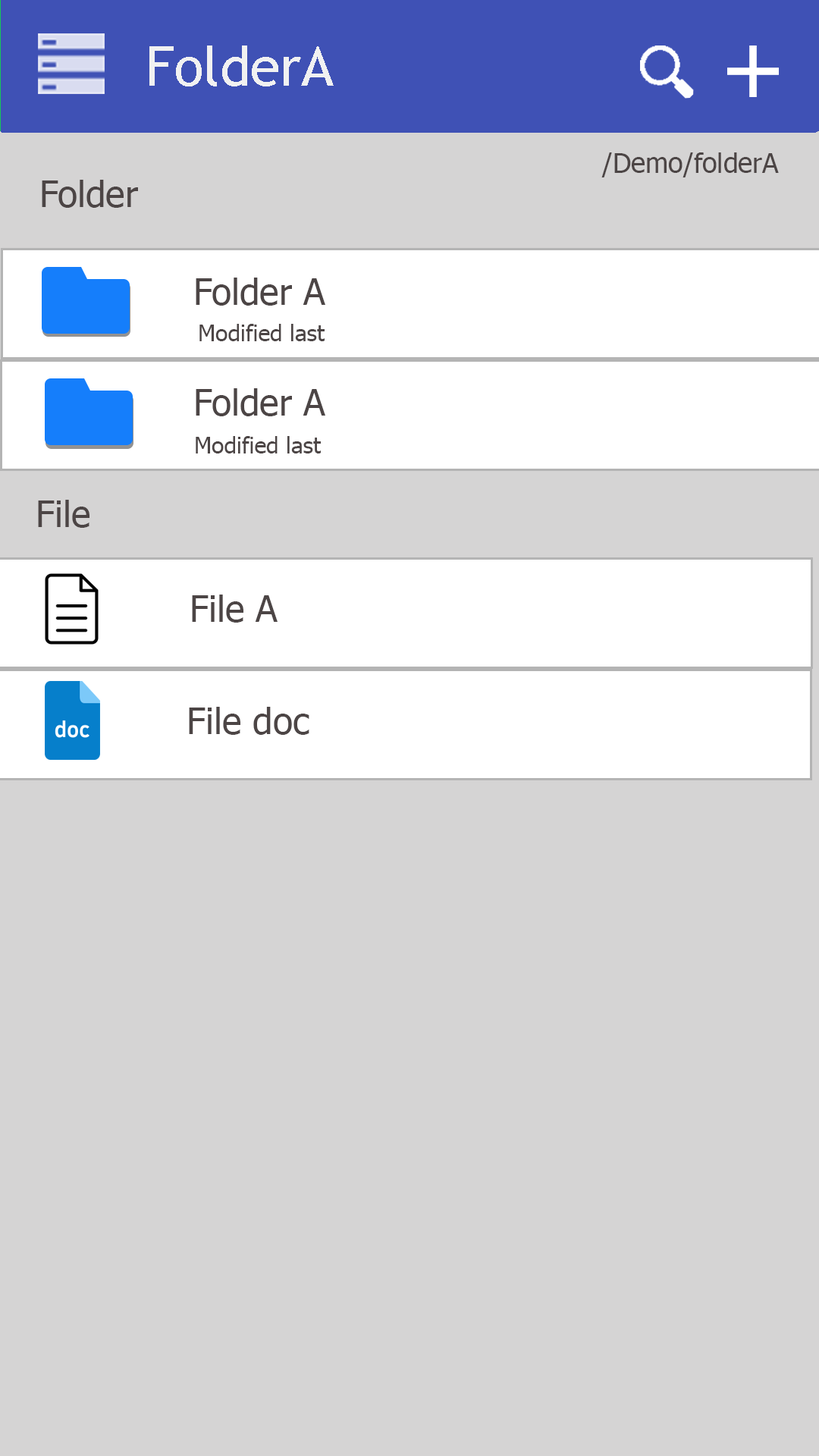
<style>
.page{position:relative;width:819px;height:1456px;background:#d5d4d4}
.page>*{position:absolute;margin:0}
.t1{font:54.6px "TrebuchetMS";color:#f1f1f1}
.t2{font:27.3px "Tahoma";color:#4c4545}
.t3{font:36.4px "Tahoma";color:#4c4545}
.t4{font:22.7px "Tahoma";color:#4c4545}
</style>
<div class="page">
<p class="t1" style="left:149px;top:45px;width:185px;height:41px">FolderA</p>
<p class="t2" style="left:601px;top:152px;width:178px;height:25px">/Demo/folderA</p>
<p class="t3" style="left:42px;top:180px;width:96px;height:28px">Folder</p>
<p class="t3" style="left:196px;top:278px;width:129px;height:28px">Folder A</p>
<p class="t4" style="left:199px;top:324px;width:126px;height:17px">Modified last</p>
<p class="t3" style="left:196px;top:388px;width:129px;height:28px">Folder A</p>
<p class="t4" style="left:196px;top:436px;width:125px;height:17px">Modified last</p>
<p class="t3" style="left:38px;top:500px;width:51px;height:28px">File</p>
<p class="t3" style="left:192px;top:595px;width:86px;height:28px">File A</p>
<p class="t3" style="left:189px;top:707px;width:120px;height:28px">File doc</p>
</div>
